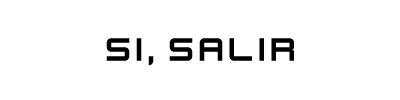
<style>
.page{position:relative;width:400px;height:100px;background:#ffffff}
.page>*{position:absolute;margin:0}
.t1{font:36px "KenVector-Future";color:#000000}
</style>
<div class="page">
<p class="t1" style="left:106px;top:38px;width:188px;height:28px">si, salir</p>
</div>
